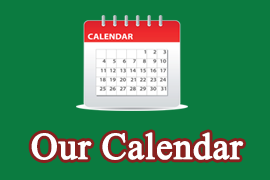
<style>
.page{position:relative;width:270px;height:180px;background:#0b7b40}
.page>*{position:absolute;margin:0}
.t1{font:37px "TimesNewRomanPSMT";color:#ffffff;font-weight:bold}
</style>
<div class="page">
<p class="t1" style="left:31px;top:132px;width:213px;height:28px">Our Calendar</p>
</div>
